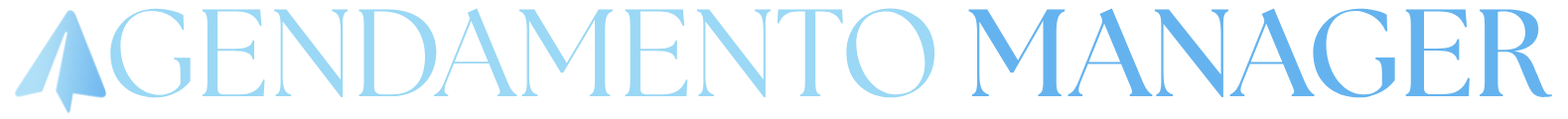
<style>
.page{position:relative;width:1568px;height:119px;background:#ffffff}
.page>*{position:absolute;margin:0}
.t1{font:124.1px "FONTSPRINGDEMO-TheSeasonsRegular";color:#9ad8f5}
.t2{font:124.1px "FONTSPRINGDEMO-TheSeasonsBold";color:#64b3ef}
</style>
<div class="page">
<p class="t1" style="left:110px;top:8px;width:1442px;height:90px">GENDAMENTO <span class="t2">MANAGER</span></p>
</div>
